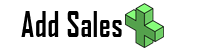
<style>
.page{position:relative;width:201px;height:50px;background:#ffffff}
.page>*{position:absolute;margin:0}
.t1{font:34px "AgencyFB-Bold";letter-spacing:0.025em;color:#000000;scale:0.85 1}
</style>
<div class="page">
<p class="t1" style="left:21px;top:11px;width:101px;height:26px">Add Sales</p>
</div>
